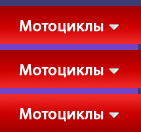
<style>
.page{position:relative;width:141px;height:132px}
.page>*{position:absolute;margin:0}
.t1{font:16px "MyriadPro-Regular";color:#ffffff;font-weight:bold}
</style>
<div class="page">
<p class="t1" style="left:19px;top:20px;width:85px;height:14px">Мотоциклы</p>
<p class="t1" style="left:19px;top:64px;width:85px;height:14px">Мотоциклы</p>
<p class="t1" style="left:19px;top:108px;width:85px;height:14px">Мотоциклы</p>
</div>
